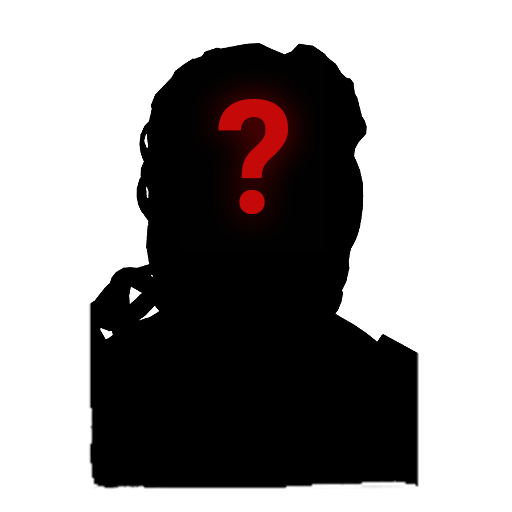
<style>
.page{position:relative;width:512px;height:512px;background:#ffffff}
.page>*{position:absolute;margin:0}
.t1{font:157.7px "Roboto-Bold";color:#c50909}
</style>
<div class="page">
<p class="t1" style="left:218px;top:99px;width:70px;height:115px">?</p>
</div>
